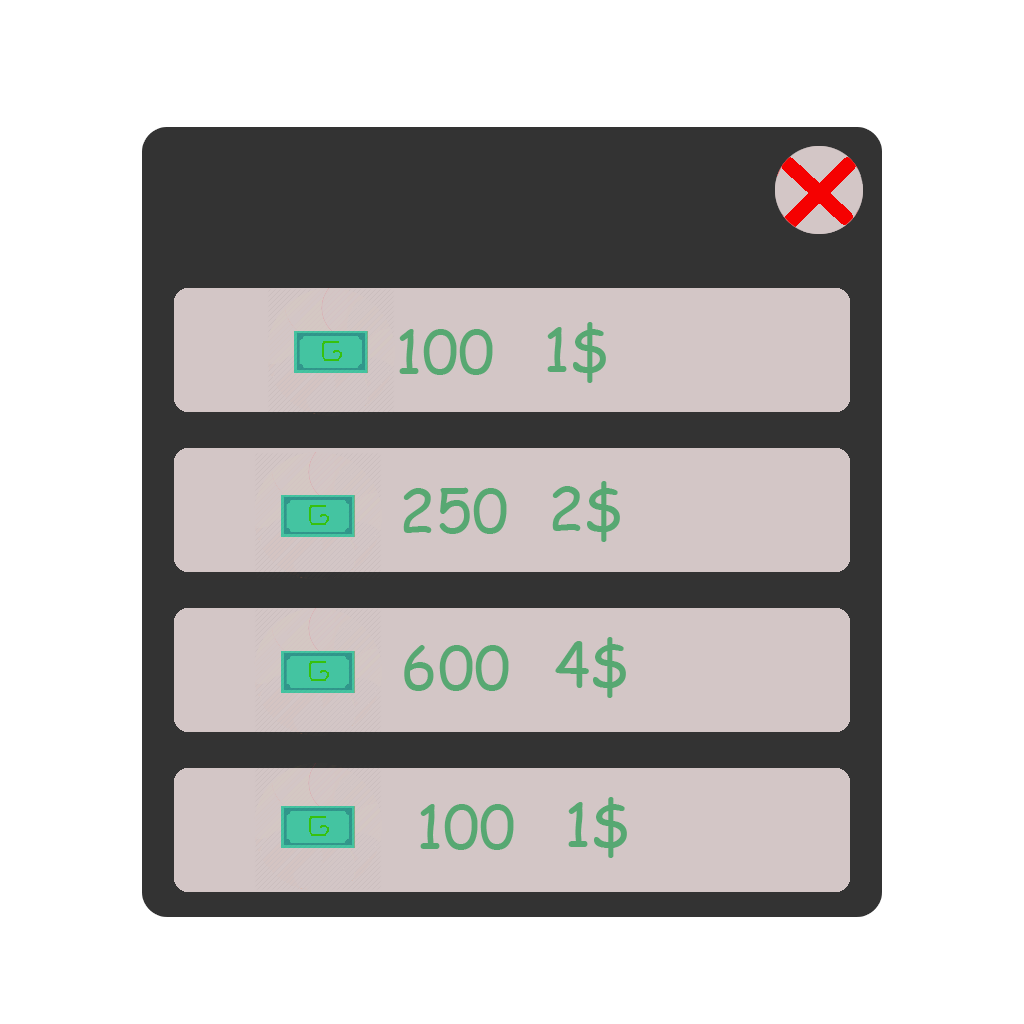
<style>
.page{position:relative;width:1024px;height:1024px;background:#ffffff}
.page>*{position:absolute;margin:0}
.t1{font:60px "ComicSansMS";color:#57a872}
</style>
<div class="page">
<p class="t1" style="left:399px;top:329px;width:94px;height:46px">100</p>
<p class="t1" style="left:547px;top:322px;width:59px;height:61px">1$</p>
<p class="t1" style="left:552px;top:481px;width:68px;height:61px">2$</p>
<p class="t1" style="left:403px;top:487px;width:104px;height:47px">250</p>
<p class="t1" style="left:555px;top:637px;width:71px;height:61px">4$</p>
<p class="t1" style="left:404px;top:645px;width:105px;height:46px">600</p>
<p class="t1" style="left:568px;top:797px;width:59px;height:61px">1$</p>
<p class="t1" style="left:420px;top:804px;width:94px;height:46px">100</p>
</div>
